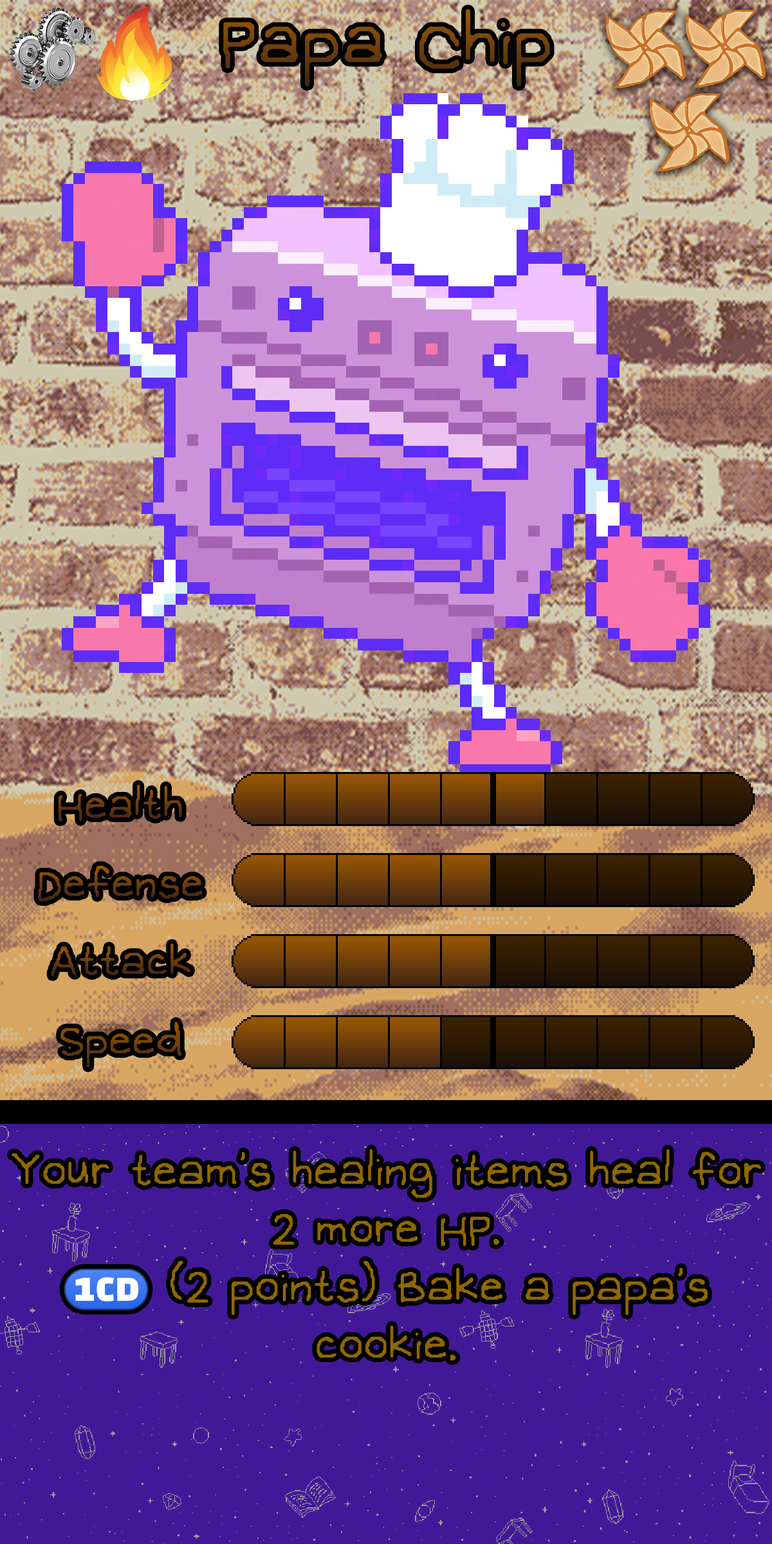
<style>
.page{position:relative;width:772px;height:1544px}
.page>*{position:absolute;margin:0}
.t1{font:184px "OMORI_GAME";color:#70400b}
.t2{font:115.8px/57.9px "OMORI_GAME";color:#8f6800}
.t3{font:72.5px/57.9px "stoogedings-Regular";letter-spacing:0.457em;color:#8f6800}
</style>
<div class="page">
<p class="t1" style="left:223px;top:9px;width:327px;height:77px">Papa Chip</p>
<p class="t2" style="left:12px;top:1149px;width:749px;height:212px;text-align:center">Your team's healing items heal for 2 more HP.<br><span class="t3">(1CD)</span>(2 points) Bake a papa's cookie.</p>
</div>
